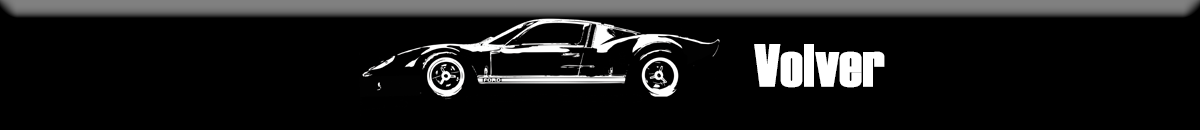
<style>
.page{position:relative;width:1200px;height:130px;background:#000000}
.page>*{position:absolute;margin:0}
.t1{font:60px "Haettenschweiler";color:#ffffff;font-weight:bold}
</style>
<div class="page">
<p class="t1" style="left:754px;top:44px;width:131px;height:44px">Volver</p>
</div>
